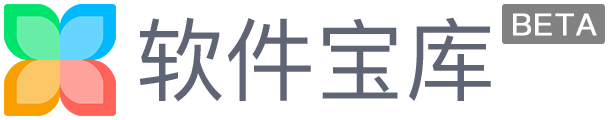
<style>
.page{position:relative;width:612px;height:120px;background:#ffffff}
.page>*{position:absolute;margin:0}
.t1{font:90px "PingFangSC-Regular";color:#5f6574}
.t2{font:30px "PingFangSC-Regular";letter-spacing:0.05em;color:#ffffff;font-weight:bold}
</style>
<div class="page">
<p class="t1" style="left:139px;top:17px;width:352px;height:85px">软件宝库</p>
<p class="t2" style="left:513px;top:13px;width:84px;height:23px">BETA</p>
</div>
